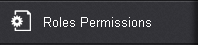
<style>
.page{position:relative;width:198px;height:45px}
.page>*{position:absolute;margin:0}
.t1{font:13px "ArialMT";color:#ffffff}
</style>
<div class="page">
<p class="t1" style="left:44px;top:17px;width:107px;height:10px">Roles Permissions</p>
</div>
